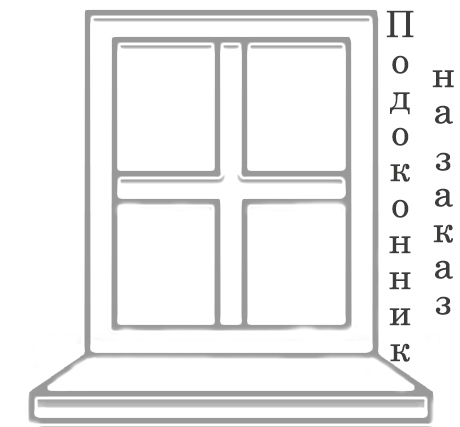
<style>
.page{position:relative;width:460px;height:427px;background:#ffffff}
.page>*{position:absolute;margin:0}
.t1{font:36px "Century";color:#3e3b3b;font-weight:bold}
.t2{font:36px "Century";color:#948f8f}
</style>
<div class="page">
<p class="t1" style="left:386px;top:10px;width:68px;height:352px"><span class="t2">     </span>на заказ <br>Подоконник</p>
</div>
